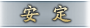
<style>
.page{position:relative;width:90px;height:28px}
.page>*{position:absolute;margin:0}
.t1{font:20px "FZBWKSFW--GB1-0"}
</style>
<div class="page">
<p class="t1" style="left:20px;top:5px;width:51px;height:17px">安  定</p>
</div>
